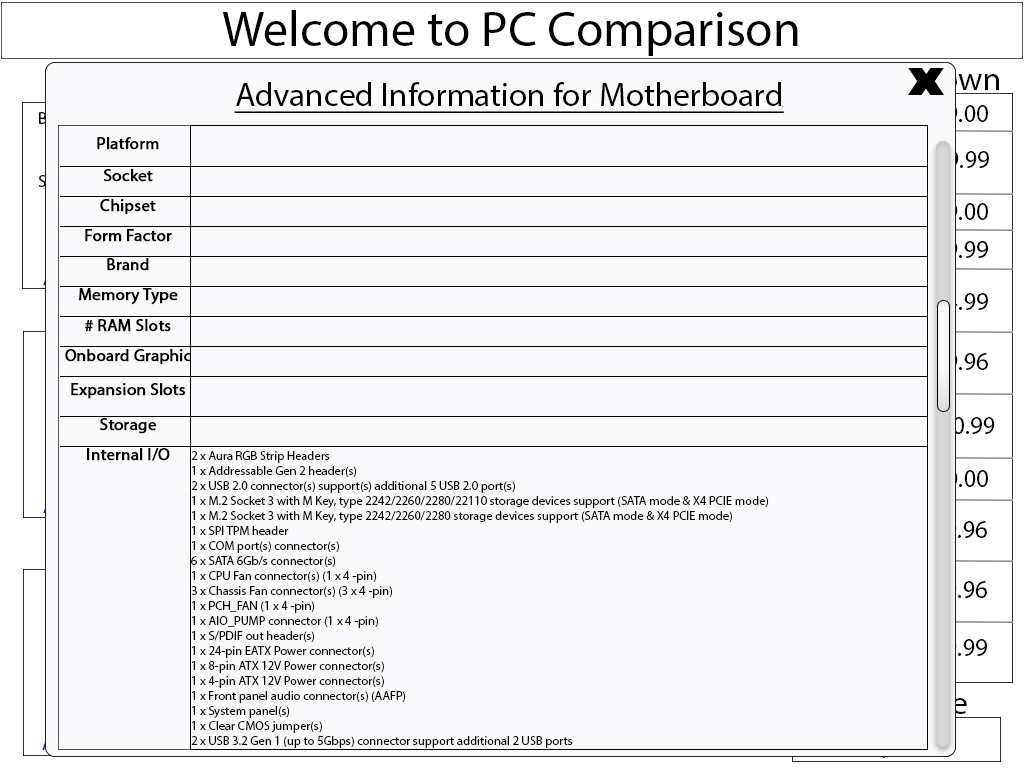
<style>
.page{position:relative;width:1024px;height:768px;background:#fafafc}
.page>*{position:absolute;margin:0}
.t1{font:50px "MyriadPro-Regular";color:#000000}
.t2{font:33.3px "MyriadPro-Regular";color:#000000;text-decoration:underline}
.t3{font:16.7px "MyriadPro-Regular";color:#fafafc}
.t4{font:25px "MyriadPro-Regular"}
.t5{font:16.7px "MyriadPro-Regular";color:#000000;font-weight:bold}
.t6{font:12.5px "MyriadPro-Regular";color:#000000}
</style>
<div class="page">
<p class="t1" style="left:222px;top:10px;width:576px;height:46px">Welcome to PC Comparison</p>
<p class="t2" style="left:234px;top:82px;width:550px;height:31px">Advanced Information for Motherboard</p>
<p class="t3" style="left:39px;top:112px;width:39px;height:12px">Brand</p>
<p class="t4" style="left:908px;top:103px;width:80px;height:22px">$699.00</p>
<p class="t5" style="left:97px;top:137px;width:62px;height:13px">Platform</p>
<p class="t4" style="left:909px;top:149px;width:80px;height:22px">$299.99</p>
<p class="t5" style="left:103px;top:169px;width:50px;height:13px">Socket</p>
<p class="t5" style="left:100px;top:199px;width:56px;height:16px">Chipset</p>
<p class="t4" style="left:908px;top:201px;width:80px;height:22px">$209.00</p>
<p class="t5" style="left:85px;top:229px;width:87px;height:13px">Form Factor</p>
<p class="t4" style="left:908px;top:239px;width:80px;height:22px">$189.99</p>
<p class="t5" style="left:107px;top:258px;width:42px;height:13px">Brand</p>
<p class="t5" style="left:79px;top:288px;width:99px;height:17px">Memory Type</p>
<p class="t4" style="left:908px;top:291px;width:80px;height:22px">$104.99</p>
<p class="t5" style="left:85px;top:319px;width:86px;height:13px"># RAM Slots</p>
<p class="t5" style="left:65px;top:349px;width:127px;height:16px">Onboard Graphic</p>
<p class="t4" style="left:908px;top:351px;width:80px;height:22px">$139.96</p>
<p class="t5" style="left:71px;top:383px;width:115px;height:16px">Expansion Slots</p>
<p class="t5" style="left:100px;top:418px;width:57px;height:16px">Storage</p>
<p class="t4" style="left:901px;top:415px;width:94px;height:22px">$1000.99</p>
<p class="t5" style="left:87px;top:448px;width:83px;height:13px">Internal I/O</p>
<p class="t6" style="left:191px;top:451px;width:578px;height:297px">2 x Aura RGB Strip Headers<br>1 x Addressable Gen 2 header(s)<br>2 x USB 2.0 connector(s) support(s) additional 5 USB 2.0 port(s)<br>1 x M.2 Socket 3 with M Key, type 2242/2260/2280/22110 storage devices support (SATA mode &amp; X4 PCIE mode)<br>1 x M.2 Socket 3 with M Key, type 2242/2260/2280 storage devices support (SATA mode &amp; X4 PCIE mode)<br>1 x SPI TPM header<br>1 x COM port(s) connector(s)<br>6 x SATA 6Gb/s connector(s)<br>1 x CPU Fan connector(s) (1 x 4 -pin)<br>3 x Chassis Fan connector(s) (3 x 4 -pin)<br>1 x PCH_FAN (1 x 4 -pin)<br>1 x AIO_PUMP connector (1 x 4 -pin)<br>1 x S/PDIF out header(s)<br>1 x 24-pin EATX Power connector(s)<br>1 x 8-pin ATX 12V Power connector(s)<br>1 x 4-pin ATX 12V Power connector(s)<br>1 x Front panel audio connector(s) (AAFP)<br>1 x System panel(s)<br>1 x Clear CMOS jumper(s)<br>2 x USB 3.2 Gen 1 (up to 5Gbps) connector support additional 2 USB ports</p>
<p class="t4" style="left:908px;top:468px;width:80px;height:22px">$100.00</p>
<p class="t4" style="left:907px;top:519px;width:80px;height:22px">$509.96</p>
<p class="t4" style="left:907px;top:579px;width:80px;height:22px">$509.96</p>
<p class="t4" style="left:907px;top:637px;width:80px;height:22px">$179.99</p>
</div>
